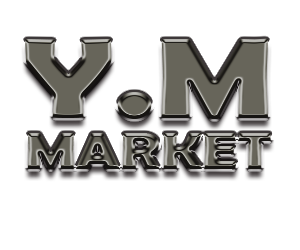
<style>
.page{position:relative;width:300px;height:250px;background:#ffffff}
.page>*{position:absolute;margin:0}
.t1{font:114.7px "BerlinSansFBDemi-Bold";color:#5f5d52;scale:1.28 1}
.t2{font:52.6px "BerlinSansFBDemi-Bold";scale:1.2 1}
</style>
<div class="page">
<p class="t1" style="left:25px;top:38px;width:243px;height:82px">Y.M</p>
<p class="t2" style="left:27px;top:133px;width:244px;height:37px">MARKET</p>
</div>
